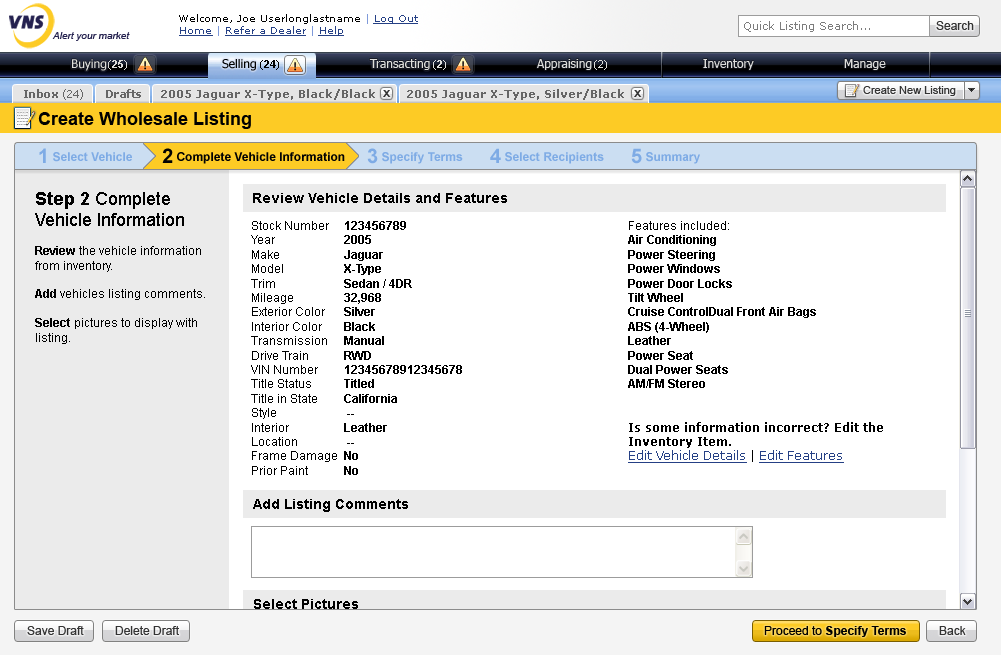
<style>
.page{position:relative;width:1001px;height:655px;background:#ffffff}
.page>*{position:absolute;margin:0}
.t1{font:10px "Verdana";color:#010101}
.t2{font:10px "Verdana";color:#7f9ada}
.t3{font:10px "Verdana";color:#254085;text-decoration:underline}
.t4{font:11px "Verdana";color:#7c7c7c}
.t5{font:12px "ArialMT";color:#333333}
.t6{font:10px "Arial-ItalicMT";color:#24214f}
.t7{font:12px "Tahoma";color:#dededc}
.t8{font:11px "Arial-BoldMT";color:#dededc}
.t9{font:11px "ArialMT";color:#dededc}
.t10{font:12px "Tahoma";color:#010101}
.t11{font:11px "ArialMT";color:#010101}
.t12{font:11px "Arial-BoldMT";color:#010101}
.t13{font:11px "Verdana-Bold";letter-spacing:-0.05em;color:#666666}
.t14{font:11px "Verdana";letter-spacing:-0.05em;color:#666666}
.t15{font:11px "Verdana-Bold";color:#666666}
.t16{font:11px "ArialMT";color:#333333}
.t17{font:10px "Arial-BoldMT";color:#333333;scale:1.1 1}
.t18{font:18px "Arial-BoldMT";color:#000000}
.t19{font:12px "Arial-BoldMT";color:#7eabe5}
.t20{font:20px "Arial-BoldMT";color:#7eabe5}
.t21{font:12px "Arial-BoldMT";color:#030303}
.t22{font:20px "Arial-BoldMT";color:#030303}
.t23{font:12px "ArialMT";color:#000000}
.t24{font:18px "ArialMT";color:#000000}
.t25{font:12px "Arial-BoldMT";color:#000000}
.t26{font:14px "Arial-BoldMT";color:#000000}
.t27{font:12px "Verdana-Bold";color:#000000}
.t28{font:12px "Verdana";color:#254085;text-decoration:underline}
.t29{font:12px "Verdana";color:#000000}
</style>
<div class="page">
<p class="t1" style="left:179px;top:14px;width:239px;height:10px">Welcome, Joe Userlonglastname<span class="t2"> | </span><span class="t3">Log Out</span></p>
<p class="t3" style="left:179px;top:26px;width:165px;height:10px">Home <span class="t2">| </span>Refer a Dealer <span class="t2">| </span>Help</p>
<p class="t4" style="left:744px;top:21px;width:126px;height:11px">Quick Listing Search...</p>
<p class="t5" style="left:936px;top:21px;width:38px;height:9px">Search</p>
<p class="t6" style="left:52px;top:32px;width:78px;height:9px">Alert your market</p>
<p class="t7" style="left:72px;top:59px;width:35px;height:12px">Buying</p>
<p class="t8" style="left:108px;top:60px;width:19px;height:10px"><span class="t9"> (</span>25<span class="t9">)</span></p>
<p class="t10" style="left:222px;top:59px;width:34px;height:12px">Selling</p>
<p class="t11" style="left:260px;top:60px;width:19px;height:10px">(24)</p>
<p class="t12" style="left:260px;top:60px;width:19px;height:10px"><span class="t11"> (</span>24<span class="t11">)</span></p>
<p class="t7" style="left:369px;top:59px;width:61px;height:11px">Transacting</p>
<p class="t9" style="left:433px;top:60px;width:13px;height:10px">(<span class="t8">2</span>)</p>
<p class="t7" style="left:537px;top:59px;width:55px;height:11px">Appraising</p>
<p class="t9" style="left:594px;top:60px;width:13px;height:10px">(2)</p>
<p class="t7" style="left:703px;top:59px;width:51px;height:11px">Inventory</p>
<p class="t7" style="left:844px;top:59px;width:42px;height:11px">Manage</p>
<p class="t13" style="left:24px;top:89px;width:59px;height:11px">Inbox <span class="t14">(24)</span></p>
<p class="t13" style="left:106px;top:89px;width:35px;height:9px">Drafts</p>
<p class="t15" style="left:161px;top:89px;width:214px;height:11px">2005 Jaguar X-Type, Black/Black</p>
<p class="t15" style="left:407px;top:89px;width:217px;height:11px">2005 Jaguar X-Type, Silver/Black</p>
<p class="t16" style="left:863px;top:86px;width:93px;height:10px">Create New Listing</p>
<p class="t17" style="left:383px;top:90px;width:8px;height:7px">X</p>
<p class="t17" style="left:634px;top:90px;width:8px;height:7px">X</p>
<p class="t18" style="left:38px;top:112px;width:213px;height:17px">Create Wholesale Listing</p>
<p class="t19" style="left:39px;top:148px;width:93px;height:15px"><span class="t20">1</span> Select Vehicle</p>
<p class="t21" style="left:162px;top:148px;width:183px;height:16px"><span class="t22">2</span> Complete Vehicle Information</p>
<p class="t19" style="left:367px;top:148px;width:96px;height:16px"><span class="t20">3</span> Specify Terms</p>
<p class="t19" style="left:490px;top:148px;width:114px;height:16px"><span class="t20">4</span> Select Recipients</p>
<p class="t19" style="left:631px;top:148px;width:69px;height:16px"><span class="t20">5</span> Summary</p>
<p class="t23" style="left:35px;top:192px;width:170px;height:152px"><span class="t18">Step 2 </span><span class="t24">Complete Vehicle Information<br></span><span class="t25"><br>Review</span> the vehicle information from inventory.<br><span class="t25"><br>Add</span> vehicles listing comments. <br><span class="t25"><br>Select</span> pictures to display with listing.</p>
<p class="t26" style="left:253px;top:193px;width:254px;height:10px">Review Vehicle Details and Features</p>
<p class="t23" style="left:251px;top:221px;width:86px;height:254px">Stock Number<br>Year<br>Make <br>Model<br>Trim <br>Mileage <br>Exterior Color <br>Interior Color <br>Transmission <br>Drive Train<br>VIN Number <br>Title Status <br>Title in State <br>Style <br>Interior <br>Location <br>Frame Damage<br>Prior Paint</p>
<p class="t25" style="left:344px;top:221px;width:118px;height:254px">123456789<br>2005<br>Jaguar<br>X-Type<br>Sedan / 4DR<br>32,968<br>Silver<br>Black<br>Manual<br>RWD<br>12345678912345678<br>Titled<br>California<br> --<br>Leather<br> --<br>No<br>No</p>
<p class="t25" style="left:628px;top:221px;width:255px;height:242px"><span class="t23">Features included: <br></span>Air Conditioning<br>Power Steering<br>Power Windows<br>Power Door Locks<br>Tilt Wheel<br>Cruise ControlDual Front Air Bags<br>ABS (4-Wheel)<br>Leather<br>Power Seat<br>Dual Power Seats<br>AM/FM Stereo<br><br><span class="t27"><br>Is some information incorrect? Edit the Inventory Item. <br></span><span class="t28">Edit Vehicle Details</span><span class="t29"> | </span><span class="t28">Edit Features</span></p>
<p class="t26" style="left:253px;top:499px;width:155px;height:13px">Add Listing Comments</p>
<p class="t26" style="left:254px;top:599px;width:104px;height:10px">Select Pictures</p>
<p class="t5" style="left:27px;top:626px;width:57px;height:9px">Save Draft</p>
<p class="t5" style="left:115px;top:626px;width:64px;height:9px">Delete Draft</p>
<p class="t25" style="left:764px;top:626px;width:142px;height:11px"><span class="t23">Proceed to </span>Specify Terms</p>
<p class="t5" style="left:939px;top:626px;width:27px;height:9px">Back</p>
</div>
